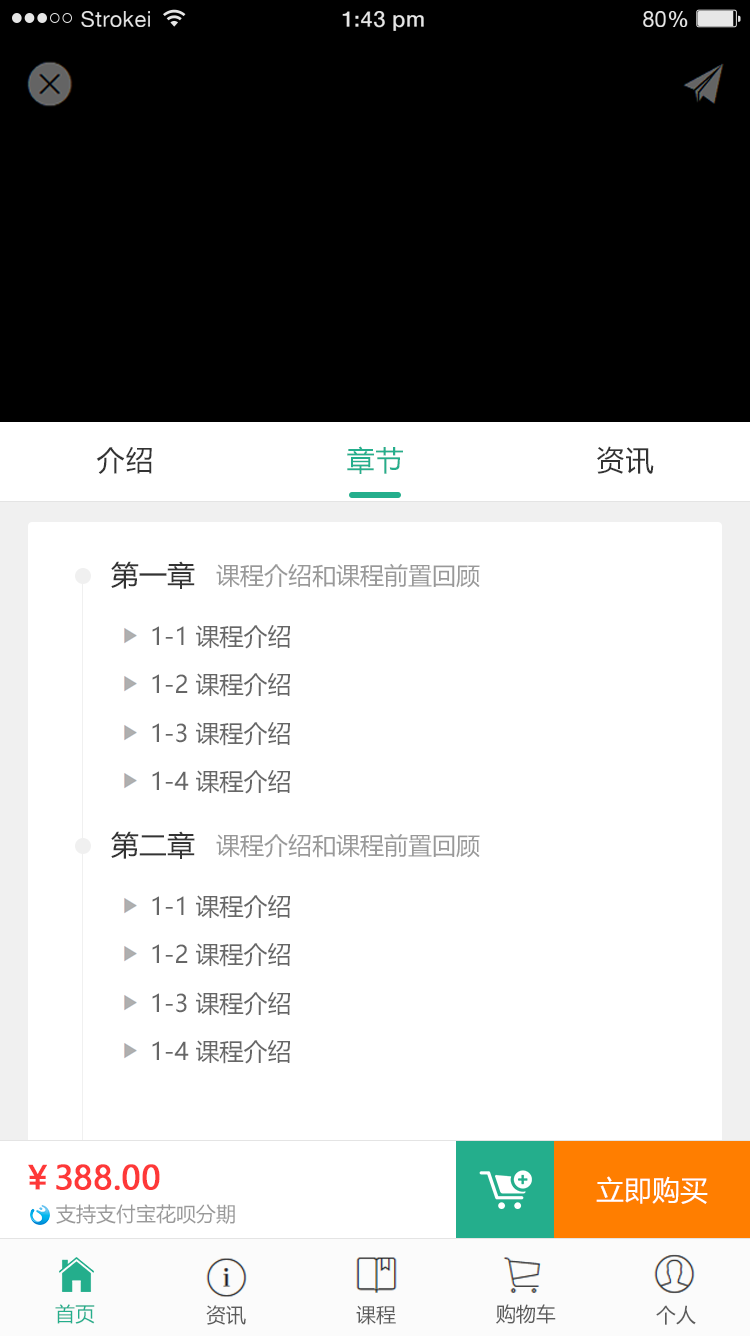
<style>
.page{position:relative;width:750px;height:1336px;background:#ffffff}
.page>*{position:absolute;margin:0}
.t1{font:21.8px "HelveticaNeue";letter-spacing:0.02em;color:#e6e6e6}
.t2{font:21.8px "HelveticaNeue-Medium";letter-spacing:0.02em;color:#e6e6e6}
.t3{font:28px "MicrosoftYaHei";letter-spacing:0.05em;color:#333333}
.t4{font:28px "MicrosoftYaHei";letter-spacing:0.05em;color:#24ae8c}
.t5{font:28px "MicrosoftYaHei";color:#333333}
.t6{font:24px "MicrosoftYaHei";color:#999999}
.t7{font:24px "MicrosoftYaHei";color:#666666}
.t8{font:32px "MicrosoftYaHei";color:#fe3838;font-weight:bold}
.t9{font:28px "MicrosoftYaHei";color:#ffffff}
.t10{font:20px "MicrosoftYaHei";color:#999999}
.t11{font:20px "MicrosoftYaHei";color:#24ae8c}
.t12{font:20px "MicrosoftYaHei";color:#5b5b5b}
</style>
<div class="page">
<p class="t1" style="left:81px;top:11px;width:69px;height:16px">Strokei</p>
<p class="t2" style="left:342px;top:11px;width:82px;height:20px">1:43 pm</p>
<p class="t1" style="left:643px;top:11px;width:45px;height:16px">80<span class="t2">%</span></p>
<p class="t3" style="left:96px;top:447px;width:56px;height:27px">介绍</p>
<p class="t4" style="left:347px;top:446px;width:56px;height:28px">章节</p>
<p class="t3" style="left:597px;top:446px;width:57px;height:28px">资讯</p>
<p class="t5" style="left:111px;top:561px;width:84px;height:28px">第一章</p>
<p class="t6" style="left:216px;top:563px;width:264px;height:25px">课程介绍和课程前置回顾</p>
<p class="t7" style="left:152px;top:625px;width:138px;height:24px">1-1 课程介绍</p>
<p class="t7" style="left:152px;top:673px;width:138px;height:24px">1-2 课程介绍</p>
<p class="t7" style="left:152px;top:722px;width:138px;height:24px">1-3 课程介绍</p>
<p class="t7" style="left:152px;top:770px;width:138px;height:24px">1-4 课程介绍</p>
<p class="t5" style="left:111px;top:831px;width:84px;height:28px">第二章</p>
<p class="t6" style="left:216px;top:833px;width:264px;height:25px">课程介绍和课程前置回顾</p>
<p class="t7" style="left:152px;top:895px;width:138px;height:24px">1-1 课程介绍</p>
<p class="t7" style="left:152px;top:943px;width:138px;height:24px">1-2 课程介绍</p>
<p class="t7" style="left:152px;top:992px;width:138px;height:24px">1-3 课程介绍</p>
<p class="t7" style="left:152px;top:1040px;width:138px;height:24px">1-4 课程介绍</p>
<p class="t8" style="left:28px;top:1164px;width:132px;height:26px">￥388.00</p>
<p class="t9" style="left:596px;top:1176px;width:112px;height:28px">立即购买</p>
<p class="t10" style="left:56px;top:1204px;width:179px;height:20px">支持支付宝花呗分期</p>
<p class="t11" style="left:55px;top:1304px;width:40px;height:20px">首页</p>
<p class="t12" style="left:206px;top:1305px;width:40px;height:20px">资讯</p>
<p class="t12" style="left:356px;top:1305px;width:40px;height:20px">课程</p>
<p class="t12" style="left:496px;top:1304px;width:60px;height:20px">购物车</p>
<p class="t12" style="left:656px;top:1305px;width:40px;height:20px">个人</p>
</div>
